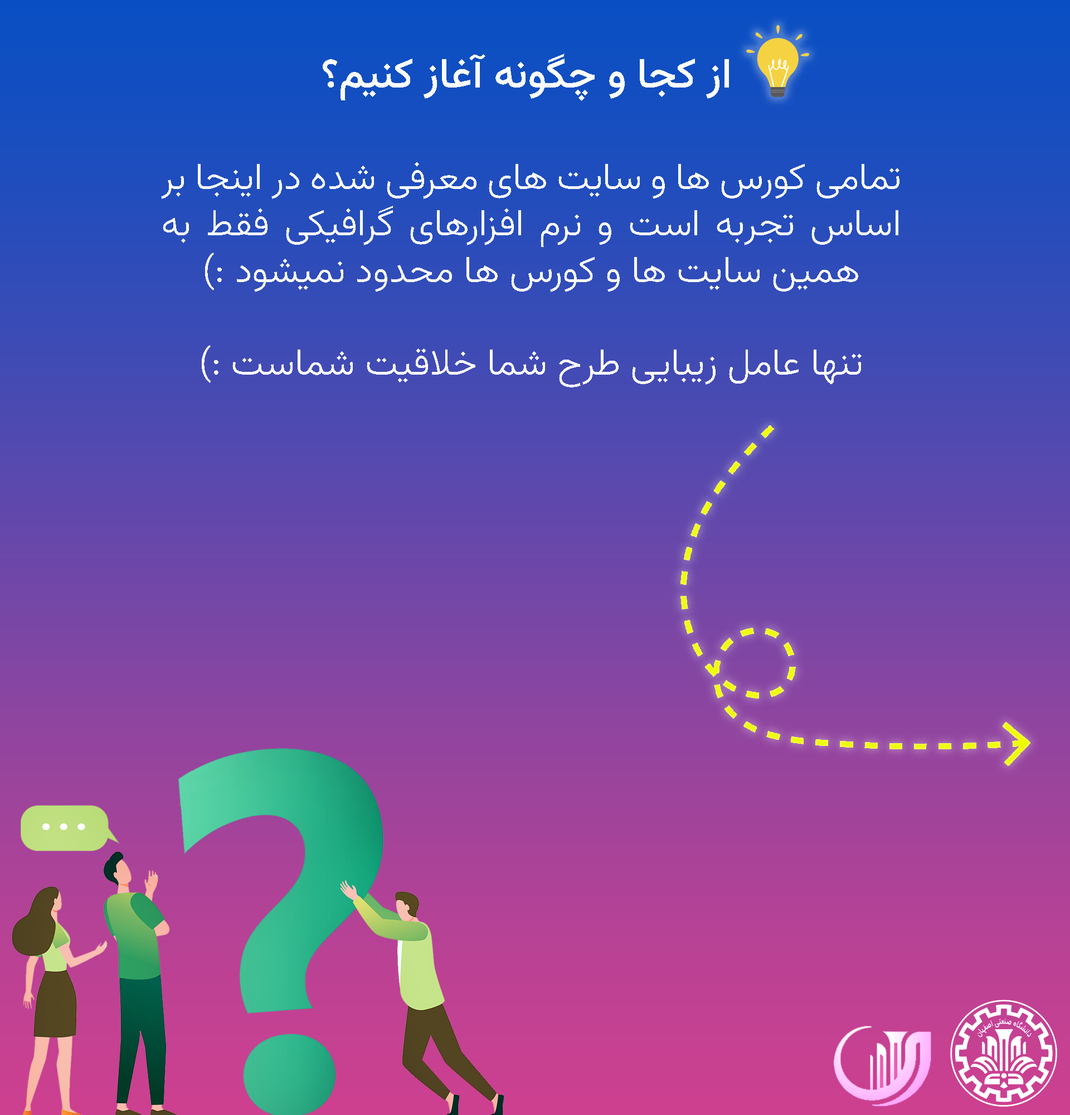
<style>
.page{position:relative;width:1070px;height:1115px}
.page>*{position:absolute;margin:0}
.t1{font:41.8px "Vazirmatn-Medium";color:#fbfcfc}
.t2{font:37.2px/46.4px "Vazirmatn-Light";color:#fbfcfc}
</style>
<div class="page">
<p class="t1" style="left:323px;top:53px;width:406px;height:48px">از کجا و چگونه آغاز کنیم؟</p>
<p class="t2" style="left:161px;top:162px;width:738px;height:225px;text-align:justify">تمامی کورس ها و سایت های معرفی شده در اینجا بر اساس تجربه است و نرم افزارهای گرافیکی فقط به همین سایت ها و کورس ها محدود نمیشود :)<br><br>تنها عامل زیبایی طرح شما خلاقیت شماست :)</p>
</div>
